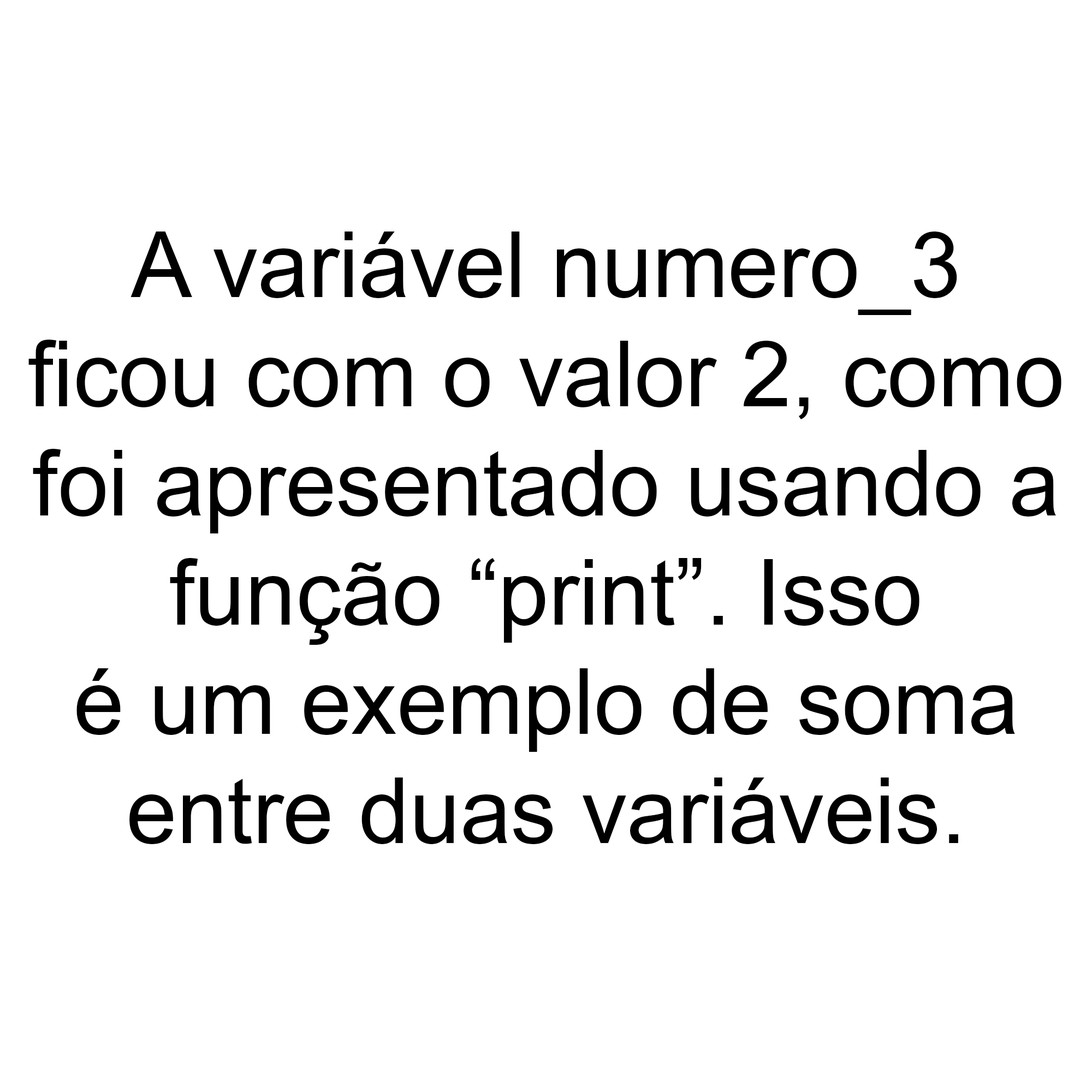
<style>
.page{position:relative;width:1092px;height:1092px;background:#ffffff}
.page>*{position:absolute;margin:0}
.t1{font:91px "ArialMT";color:#000000}
</style>
<div class="page">
<p class="t1" style="left:28px;top:232px;width:1033px;height:612px;text-align:center">A variável numero_3<br>ficou com o valor 2, como<br>foi apresentado usando a<br>função “print”. Isso<br>é um exemplo de soma<br>entre duas variáveis.</p>
</div>
